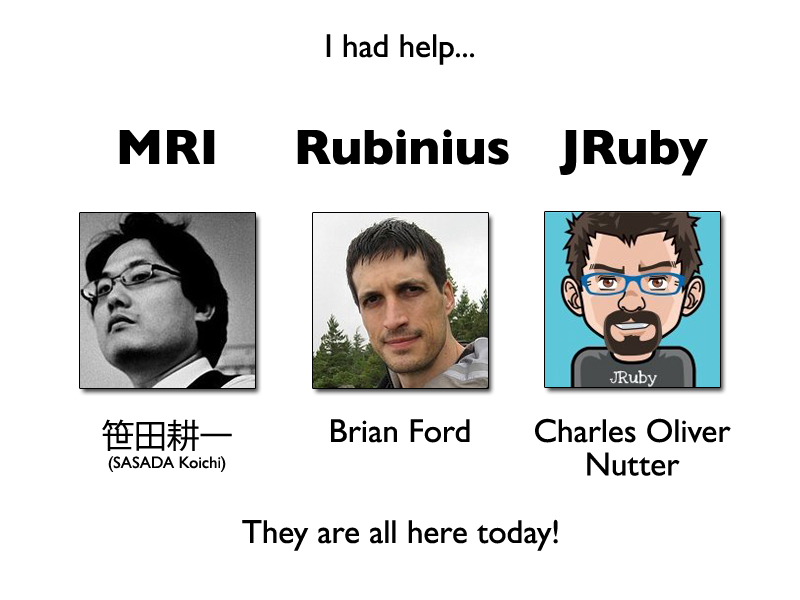
<style>
.page{position:relative;width:800px;height:600px;background:#ffffff}
.page>*{position:absolute;margin:0}
.t1{font:33.3px "GillSans";color:#000000}
.t2{font:50px "GillSans-Bold";color:#000000}
.t3{font:16.7px "GillSans";color:#000000}
.t4{font:33.3px "KozGoPr6N-Regular";color:#000000}
.t5{font:33.3px/33.3px "GillSans";color:#000000}
</style>
<div class="page">
<p class="t1" style="left:326px;top:34px;width:149px;height:31px">I had help...</p>
<p class="t2" style="left:119px;top:130px;width:96px;height:34px">MRI</p>
<p class="t2" style="left:297px;top:129px;width:212px;height:36px">Rubinius</p>
<p class="t2" style="left:559px;top:130px;width:149px;height:46px">JRuby</p>
<p class="t3" style="left:102px;top:419px;width:130px;height:53px;text-align:center"><span class="t4">笹田耕一<br></span>(SASADA Koichi)</p>
<p class="t1" style="left:331px;top:419px;width:139px;height:24px">Brian Ford</p>
<p class="t5" style="left:535px;top:418px;width:196px;height:58px;text-align:center">Charles Oliver<br>Nutter</p>
<p class="t1" style="left:242px;top:519px;width:316px;height:32px">They are all here today!</p>
</div>
